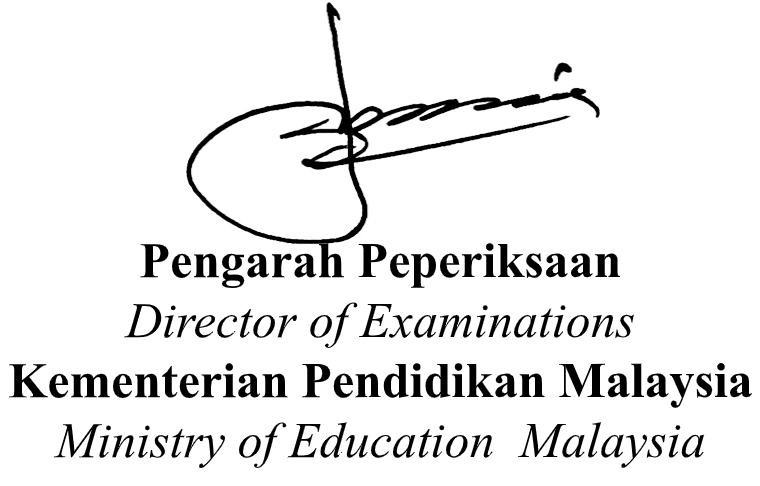
<style>
.page{position:relative;width:760px;height:486px;background:#ffffff}
.page>*{position:absolute;margin:0}
.t1{font:50px "TimesNewRomanPS-BoldMT";color:#000000}
.t2{font:50px "TimesNewRomanPS-ItalicMT";color:#000000}
</style>
<div class="page">
<p class="t1" style="left:9px;top:243px;width:743px;height:226px;text-align:center">Pengarah Peperiksaan<br><span class="t2">Director of Examinations<br></span>Kementerian Pendidikan Malaysia<br><span class="t2">Ministry of Education  Malaysia</span></p>
</div>
